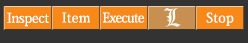
<style>
.page{position:relative;width:248px;height:43px;background:#333333}
.page>*{position:absolute;margin:0}
.t1{font:13.2px "KozMinPro-Medium";letter-spacing:-0.01em;color:#ffffff}
.t2{font:13.2px "KozMinPro-Medium";letter-spacing:-0.01em;color:#ffffff;scale:0.95 1}
.t3{font:13.2px "KozMinPro-Medium";letter-spacing:0.025em;color:#ffffff}
.t4{font:13.2px "KozMinPro-Medium";letter-spacing:-0.045em;color:#ffffff}
.t5{font:13.2px "KozMinPro-Medium";letter-spacing:-0.045em;color:#ffffff;scale:0.97 1}
.t6{font:13.2px "KozMinPro-Medium";letter-spacing:-0.045em;color:#ffffff;scale:0.96 1}
</style>
<div class="page">
<p class="t1" style="left:7px;top:12px;width:42px;height:15px">I<span class="t2">n</span>spect</p>
<p class="t3" style="left:62px;top:12px;width:28px;height:11px">Item</p>
<p class="t4" style="left:103px;top:12px;width:42px;height:11px">E<span class="t5">x</span>e<span class="t5">c</span><span class="t6">u</span>te</p>
<p class="t3" style="left:206px;top:12px;width:28px;height:14px">Stop</p>
</div>
